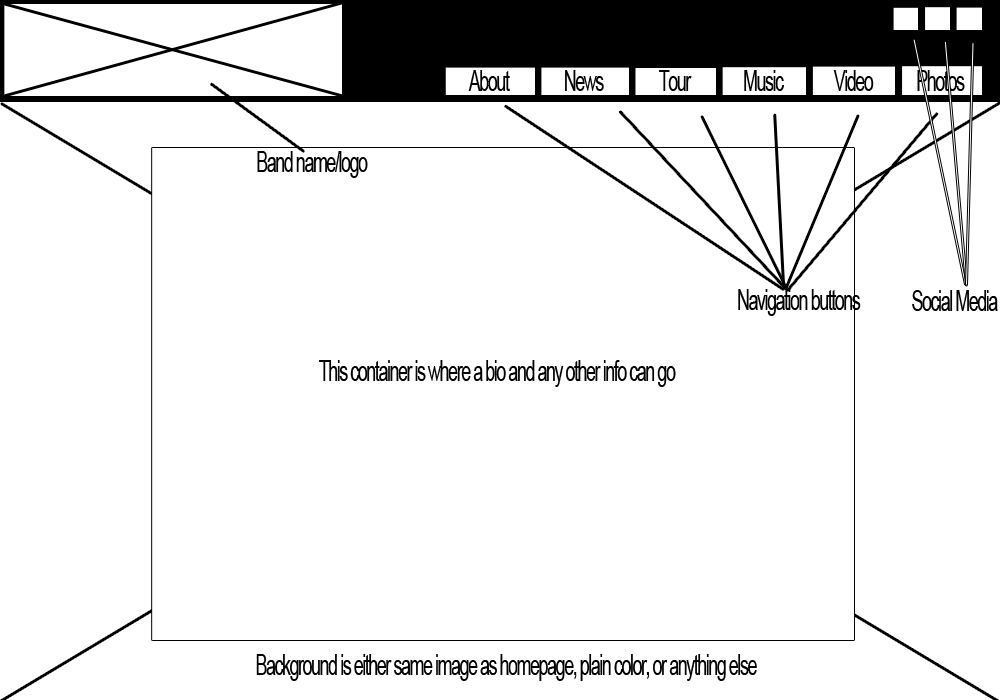
<style>
.page{position:relative;width:1000px;height:700px;background:#ffffff}
.page>*{position:absolute;margin:0}
.t1{font:28.9px "ArialMT";letter-spacing:-0.08em;color:#000000;scale:0.62 1}
</style>
<div class="page">
<p class="t1" style="left:468px;top:70px;width:42px;height:21px">About</p>
<p class="t1" style="left:565px;top:70px;width:39px;height:21px">News</p>
<p class="t1" style="left:659px;top:70px;width:33px;height:21px">Tour</p>
<p class="t1" style="left:744px;top:70px;width:40px;height:21px">Music</p>
<p class="t1" style="left:833px;top:70px;width:41px;height:21px">Video</p>
<p class="t1" style="left:917px;top:70px;width:48px;height:21px">Photos</p>
<p class="t1" style="left:257px;top:151px;width:111px;height:27px">Band name/logo</p>
<p class="t1" style="left:738px;top:289px;width:123px;height:27px">Navigation buttons</p>
<p class="t1" style="left:912px;top:290px;width:86px;height:21px">Social Media</p>
<p class="t1" style="left:319px;top:360px;width:357px;height:27px">This container is where a bio and any other info can go</p>
<p class="t1" style="left:256px;top:654px;width:501px;height:27px">Background is either same image as homepage, plain color, or anything else</p>
</div>
